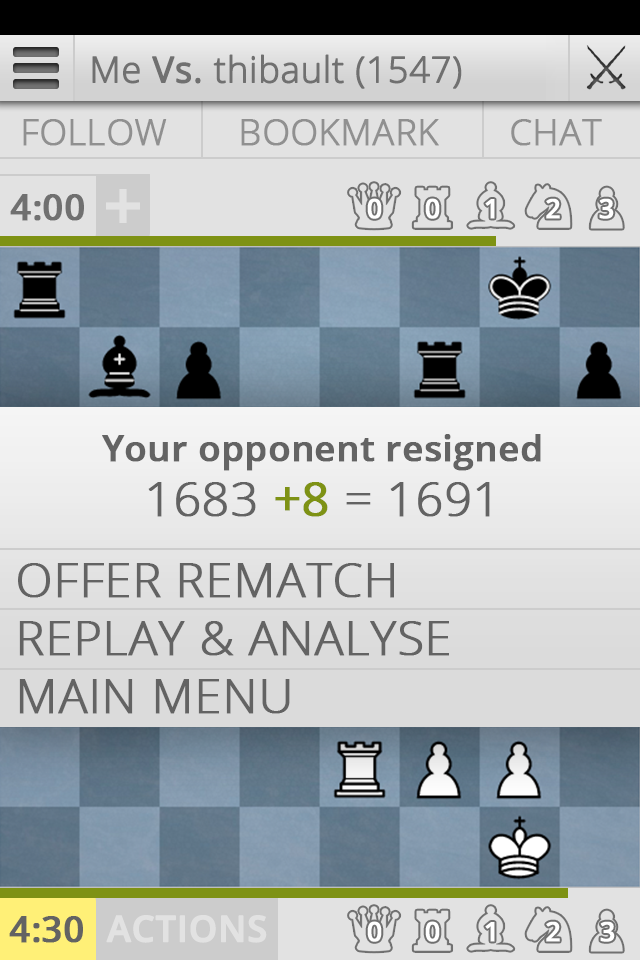
<style>
.page{position:relative;width:640px;height:960px}
.page>*{position:absolute;margin:0}
.t1{font:36px "OpenSans-Light";color:#707070;font-weight:bold}
.t2{font:36px "OpenSans";color:#707070;font-weight:bold}
.t3{font:36px "OpenSans-Light";color:#909090;font-weight:bold}
.t4{font:36px "OpenSans-Semibold";color:#707070;font-weight:bold}
.t5{font:26.8px "OpenSans-Semibold";color:#ffffff;font-weight:bold}
.t6{font:36px/48px "OpenSans-Semibold";color:#636363;font-weight:bold}
.t7{font:48px/55px "OpenSans-Light";color:#636363;font-weight:bold}
.t8{font:48px/55px "OpenSans";color:#7e9214;font-weight:bold}
.t9{font:48px "OpenSans-Light";color:#636363;font-weight:bold}
.t10{font:36px "OpenSans-Semibold";color:#636363;font-weight:bold}
.t11{font:36px "OpenSans-Semibold";color:#e2e2e2;font-weight:bold}
</style>
<div class="page">
<p class="t1" style="left:92px;top:54px;width:370px;height:35px">Me <span class="t2">Vs.</span> thibault (1547)</p>
<p class="t3" style="left:23px;top:119px;width:144px;height:27px">FOLLOW</p>
<p class="t3" style="left:241px;top:119px;width:198px;height:27px">BOOKMARK</p>
<p class="t3" style="left:511px;top:119px;width:91px;height:27px">CHAT</p>
<p class="t4" style="left:10px;top:194px;width:74px;height:27px">4:00</p>
<p class="t5" style="left:367px;top:198px;width:15px;height:21px">0</p>
<p class="t5" style="left:425px;top:198px;width:15px;height:21px">0</p>
<p class="t5" style="left:546px;top:198px;width:14px;height:21px">2</p>
<p class="t5" style="left:599px;top:198px;width:15px;height:21px">3</p>
<p class="t5" style="left:485px;top:199px;width:10px;height:20px">1</p>
<p class="t6" style="left:102px;top:434px;width:439px;height:83px;text-align:center">Your opponent resigned<br><span class="t7">1683 </span><span class="t8">+8</span><span class="t7"> = 1691</span></p>
<p class="t9" style="left:18px;top:563px;width:431px;height:151px">OFFER REMATCH<br>REPLAY &amp; ANALYSE<br>MAIN MENU</p>
<p class="t10" style="left:9px;top:916px;width:74px;height:27px">4:30</p>
<p class="t11" style="left:106px;top:915px;width:161px;height:28px">ACTIONS</p>
<p class="t5" style="left:367px;top:921px;width:15px;height:21px">0</p>
<p class="t5" style="left:425px;top:921px;width:15px;height:21px">0</p>
<p class="t5" style="left:485px;top:922px;width:10px;height:20px">1</p>
<p class="t5" style="left:546px;top:921px;width:14px;height:21px">2</p>
<p class="t5" style="left:600px;top:921px;width:15px;height:21px">3</p>
</div>
